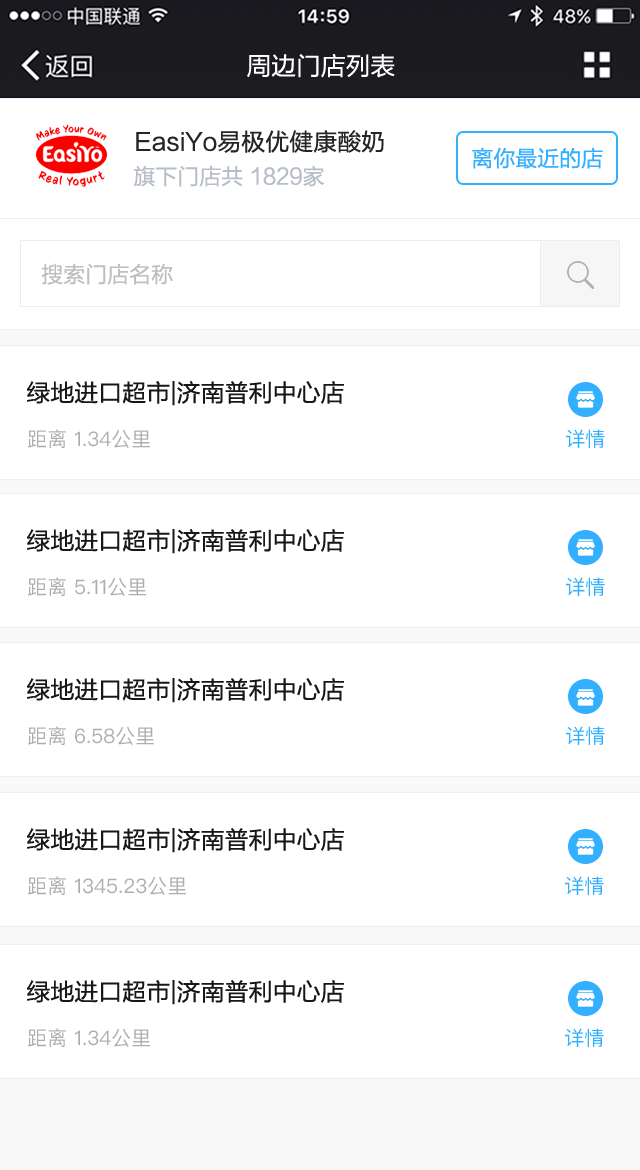
<style>
.page{position:relative;width:640px;height:1170px;background:#ffffff}
.page>*{position:absolute;margin:0}
.t1{font:24.8px "FZLTHJW--GB1-0";color:#ffffff}
.t2{font:24px "FZLTHJW--GB1-0";color:#262626}
.t3{font:22px "FZLTHJW--GB1-0";color:#32afff}
.t4{font:22px "FZLTHJW--GB1-0";color:#b7bec7}
.t5{font:22px "FZLTHJW--GB1-0";color:#bebebe}
.t6{font:24px "FZLTHJW--GB1-0";color:#171717}
.t7{font:20px "PingFangSC-Regular";color:#aeaeae}
.t8{font:20px "PingFangSC-Regular";color:#32afff}
</style>
<div class="page">
<p class="t1" style="left:247px;top:54px;width:148px;height:24px">周边门店列表</p>
<p class="t1" style="left:247px;top:54px;width:148px;height:24px">周边门店列表</p>
<p class="t2" style="left:136px;top:130px;width:248px;height:23px">EasiYo易极优健康酸奶</p>
<p class="t3" style="left:472px;top:147px;width:131px;height:22px">离你最近的店</p>
<p class="t4" style="left:133px;top:165px;width:191px;height:22px">旗下门店共 1829家</p>
<p class="t5" style="left:41px;top:263px;width:132px;height:22px">搜索门店名称</p>
<p class="t6" style="left:27px;top:381px;width:317px;height:25px">绿地进口超市|济南普利中心店</p>
<p class="t7" style="left:28px;top:429px;width:122px;height:19px">距离 1.34公里</p>
<p class="t8" style="left:566px;top:429px;width:39px;height:19px">详情</p>
<p class="t6" style="left:27px;top:529px;width:317px;height:25px">绿地进口超市|济南普利中心店</p>
<p class="t7" style="left:28px;top:577px;width:118px;height:19px">距离 5.11公里</p>
<p class="t8" style="left:566px;top:577px;width:39px;height:19px">详情</p>
<p class="t6" style="left:27px;top:678px;width:317px;height:25px">绿地进口超市|济南普利中心店</p>
<p class="t7" style="left:28px;top:726px;width:126px;height:19px">距离 6.58公里</p>
<p class="t8" style="left:566px;top:726px;width:39px;height:19px">详情</p>
<p class="t6" style="left:27px;top:828px;width:317px;height:25px">绿地进口超市|济南普利中心店</p>
<p class="t7" style="left:28px;top:876px;width:158px;height:19px">距离 1345.23公里</p>
<p class="t8" style="left:565px;top:876px;width:39px;height:19px">详情</p>
<p class="t6" style="left:27px;top:980px;width:317px;height:25px">绿地进口超市|济南普利中心店</p>
<p class="t7" style="left:28px;top:1028px;width:122px;height:19px">距离 1.34公里</p>
<p class="t8" style="left:565px;top:1028px;width:39px;height:19px">详情</p>
</div>
